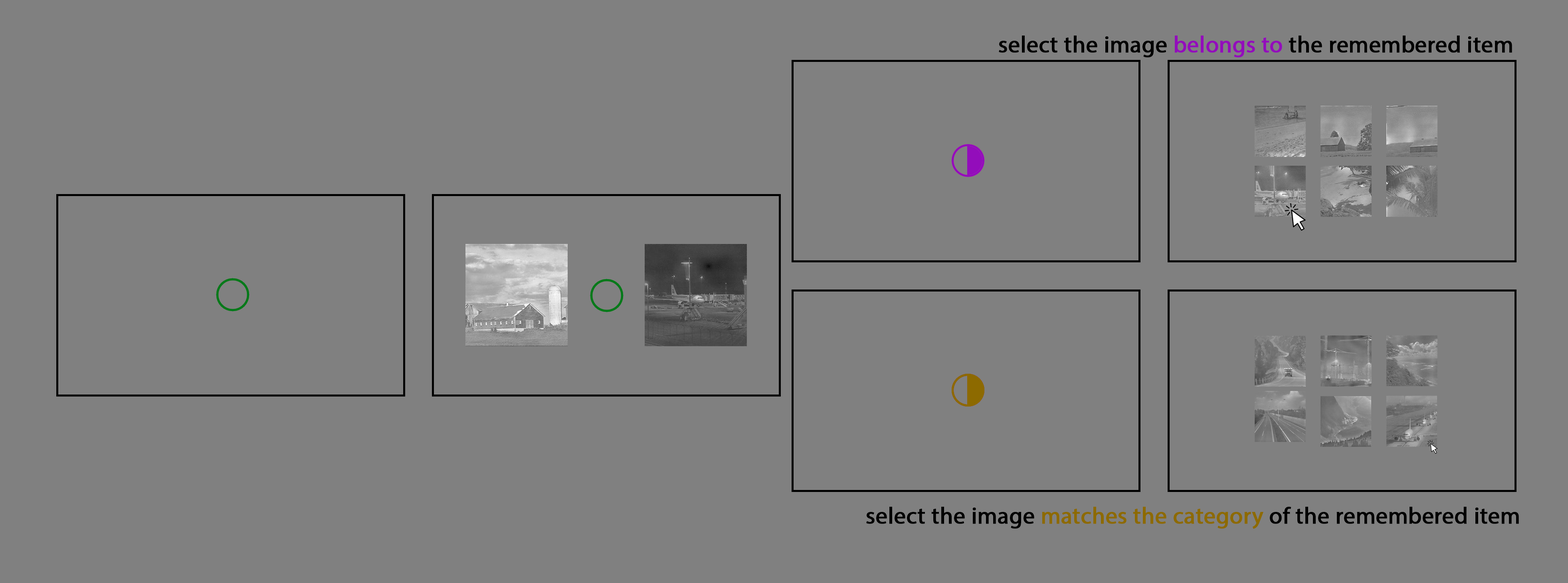
<style>
.page{position:relative;width:1568px;height:583px;background:#808080}
.page>*{position:absolute;margin:0}
.t1{font:23.3px "MyriadPro-Regular";color:#000000;font-weight:bold}
.t2{font:23.3px "MyriadPro-Regular";color:#930dbb;font-weight:bold}
.t3{font:23.3px "MyriadPro-Regular";color:#8d6a00;font-weight:bold}
</style>
<div class="page">
<p class="t1" style="left:999px;top:36px;width:513px;height:21px">select the image <span class="t2">belongs to</span> the remembered item</p>
<p class="t1" style="left:866px;top:507px;width:653px;height:22px">select the image <span class="t3">matches the category </span>of the remembered item</p>
</div>
